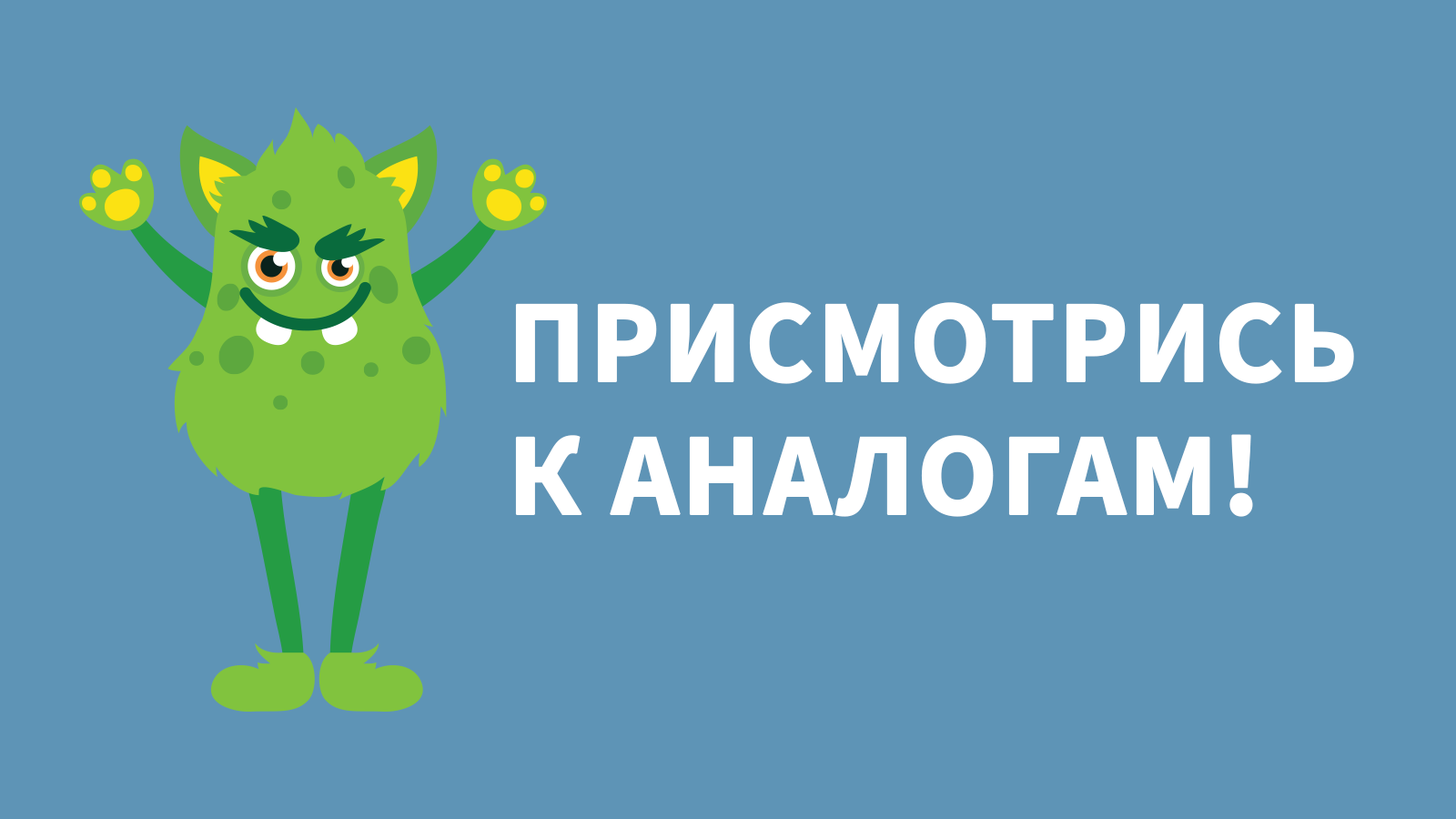
<style>
.page{position:relative;width:1456px;height:819px;background:#5e94b6}
.page>*{position:absolute;margin:0}
.t1{font:117.8px/117.4px "SourceSansPro-Bold";color:#ffffff;text-transform:uppercase;font-weight:bold}
</style>
<div class="page">
<p class="t1" style="left:515px;top:302px;width:839px;height:215px">Присмотрись <br>к аналогам!</p>
</div>
